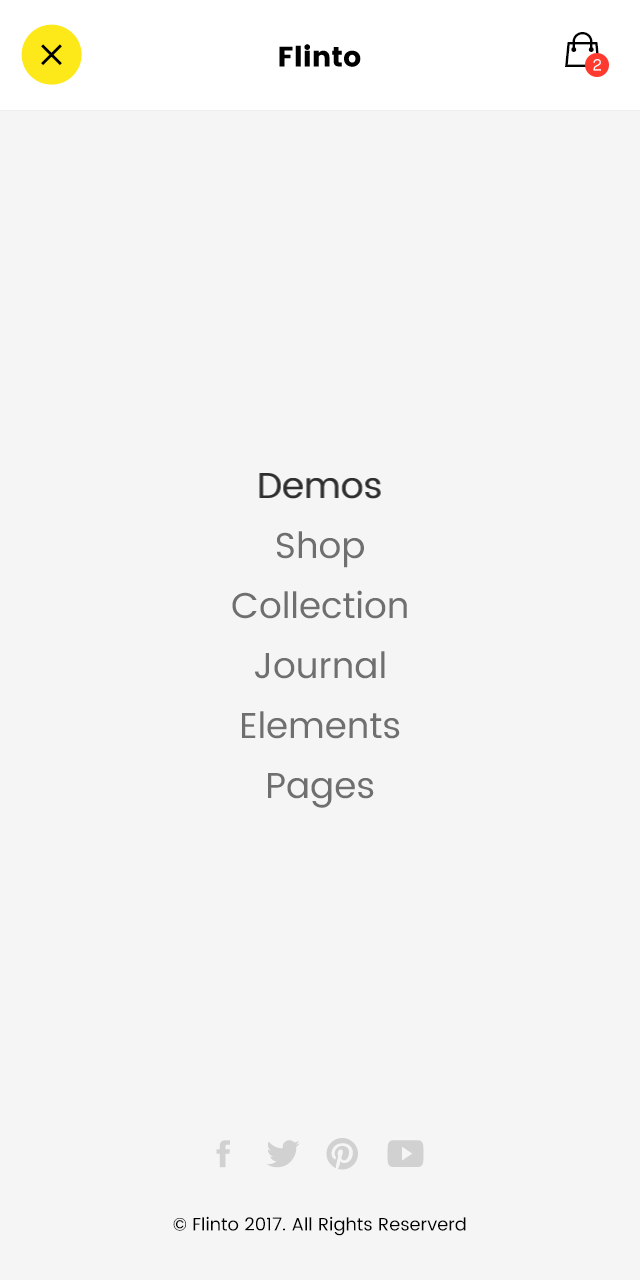
<style>
.page{position:relative;width:640px;height:1280px;background:#f5f5f5}
.page>*{position:absolute;margin:0}
.t1{font:28px "Poppins";color:#000000}
.t2{font:16px "MaisonNeue-Mono";color:#ffffff;text-transform:uppercase}
.t3{font:36px/60px "Poppins-Regular";color:#6f6f6f}
.t4{font:36px "Poppins-Regular";color:#2e2e2e}
.t5{font:18px "Poppins-Regular";color:#000000}
</style>
<div class="page">
<p class="t1" style="left:279px;top:44px;width:82px;height:23px">Flinto</p>
<p class="t2" style="left:593px;top:59px;width:8px;height:12px">2</p>
<p class="t3" style="left:232px;top:473px;width:175px;height:335px;text-align:center">Demos<br>Shop<br>Collection<br>Journal<br>Elements<br>Pages</p>
<p class="t4" style="left:259px;top:473px;width:121px;height:26px">Demos</p>
<p class="t5" style="left:173px;top:1216px;width:293px;height:20px">© Flinto 2017. All Rights Reserverd</p>
</div>
